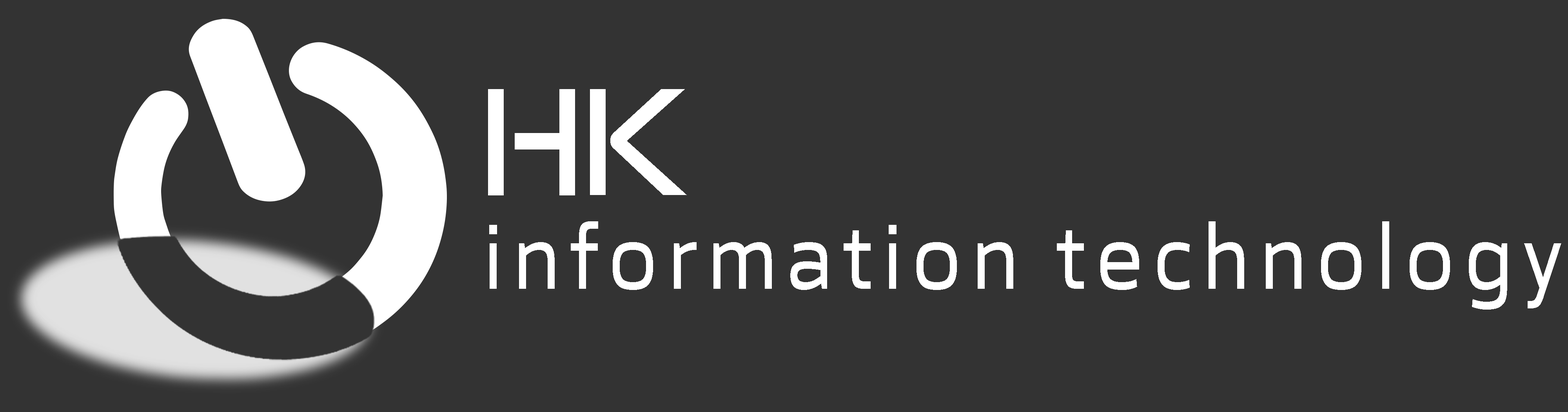
<style>
.page{position:relative;width:1568px;height:412px;background:#333333}
.page>*{position:absolute;margin:0}
.t1{font:145.8px "GoodTimesRg-Regular";color:#ffffff;scale:0.84 1}
.t2{font:95.3px "GommeSansW04-Regular";letter-spacing:0.14em;color:#ffffff;scale:0.81 1}
</style>
<div class="page">
<p class="t1" style="left:488px;top:89px;width:199px;height:106px">HK</p>
<p class="t2" style="left:489px;top:221px;width:1072px;height:88px">information technology</p>
</div>
